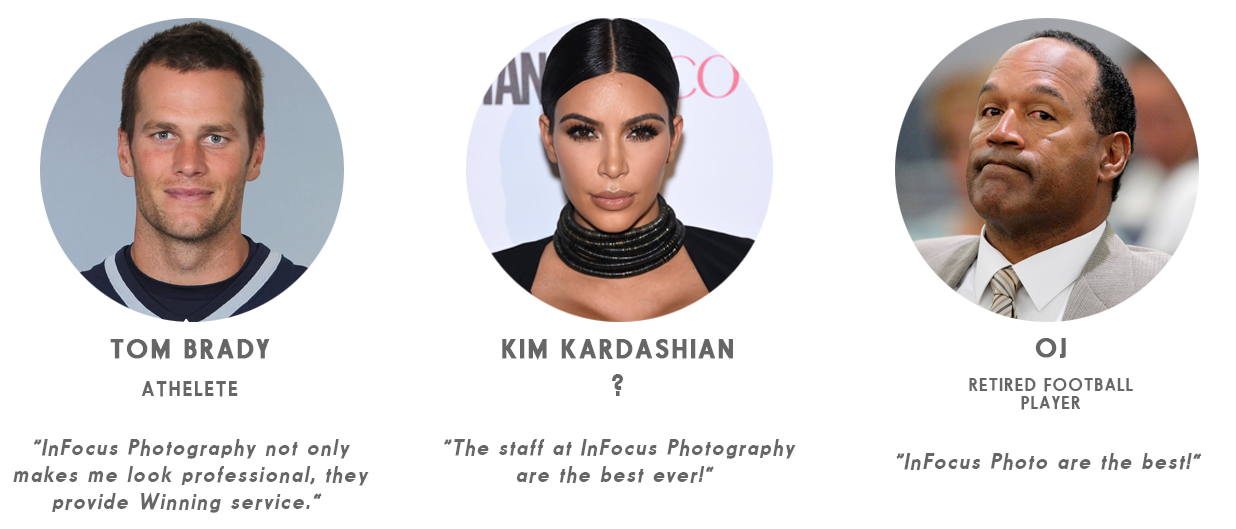
<style>
.page{position:relative;width:1236px;height:529px;background:#ffffff}
.page>*{position:absolute;margin:0}
.t1{font:22.6px "FundamentalBrigadeSchwer";letter-spacing:0.1em;color:#666666;font-style:italic}
.t2{font:27.1px/37.3px "FundamentalBrigadeSchwer";letter-spacing:0.1em;color:#666666;font-weight:bold}
.t3{font:21.5px/37.3px "FundamentalBrigadeSchwer";letter-spacing:0.1em;color:#666666}
.t4{font:31px/37.3px "FundamentalBrigadeSchwer";letter-spacing:0.1em;color:#666666}
.t5{font:18px/16px "FundamentalBrigadeSchwer";letter-spacing:0.1em;color:#666666}
.t6{font:18px/18px "FundamentalBrigadeSchwer";letter-spacing:0.1em;color:#666666}
</style>
<div class="page">
<p class="t1" style="left:13px;top:339px;width:356px;height:174px;text-align:center"><span class="t2">TOM BRADY<br></span><span class="t3">ATHELETE<br><br></span>“InFocus Photography not only<br>makes me look professional, they<br>provide Winning service.”</p>
<p class="t1" style="left:444px;top:339px;width:352px;height:144px;text-align:center"><span class="t2">KIM KARDASHIAN<br></span><span class="t4">?<br><br></span>“The staff at InFocus Photography<br>are the best ever!”</p>
<p class="t1" style="left:896px;top:338px;width:306px;height:132px;text-align:center"><span class="t2">OJ<br><br></span><span class="t5">R</span><span class="t6">ETIRED FOOTBALL<br>PLAYER<br><br></span>“InFocus Photo are the best!”</p>
</div>
